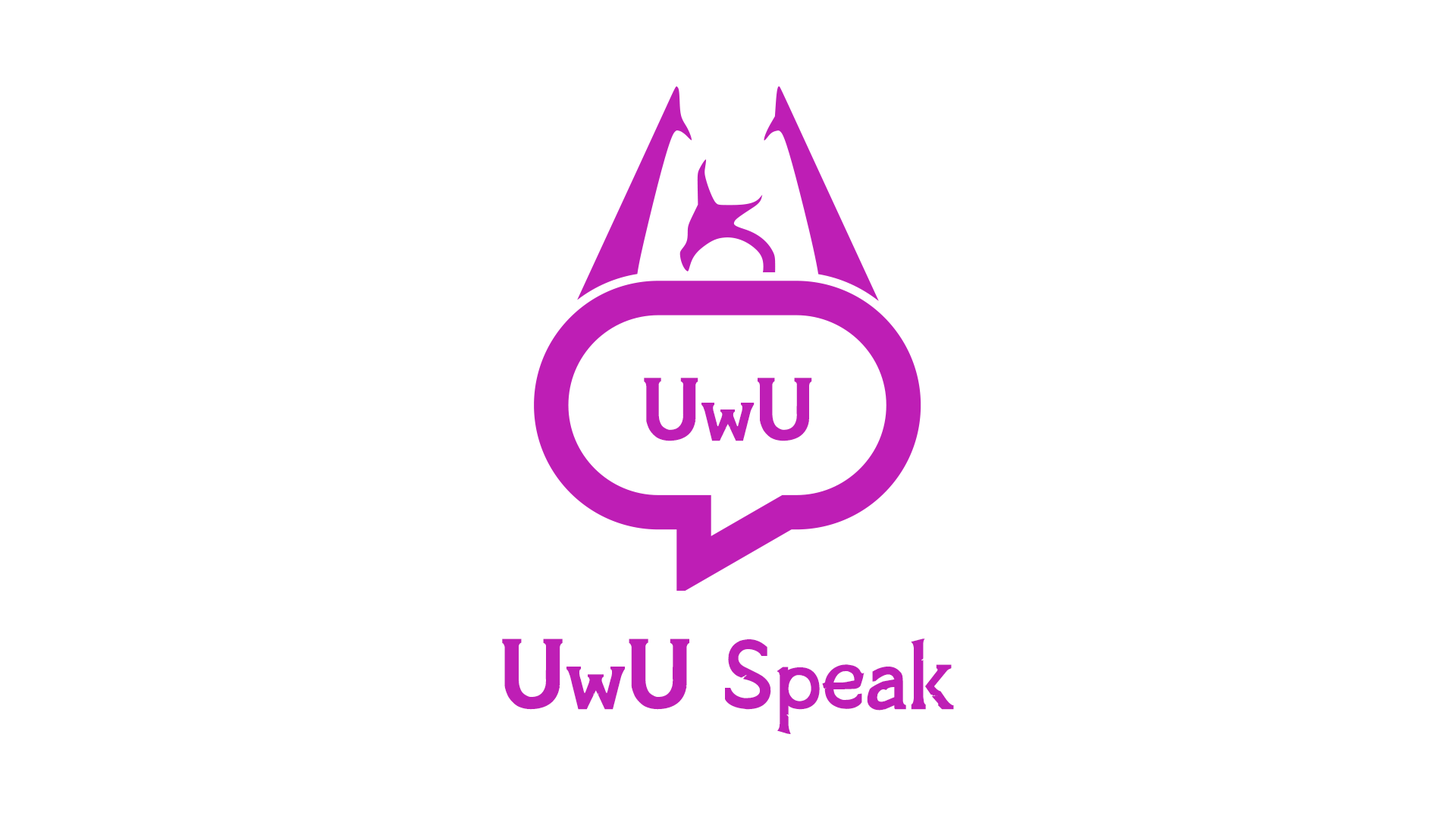
<style>
.page{position:relative;width:1456px;height:819px;background:#ffffff}
.page>*{position:absolute;margin:0}
.t1{font:113.7px "SovngardeBold";color:#be1eb5}
.t2{font:126.9px "SovngardeLight";color:#be1eb5}
.t3{font:126.9px "SovngardeBold";color:#be1eb5}
</style>
<div class="page">
<p class="t1" style="left:644px;top:378px;width:168px;height:63px">UwU</p>
<p class="t2" style="left:502px;top:639px;width:452px;height:95px"><span class="t3">UwU</span> Speak</p>
</div>
